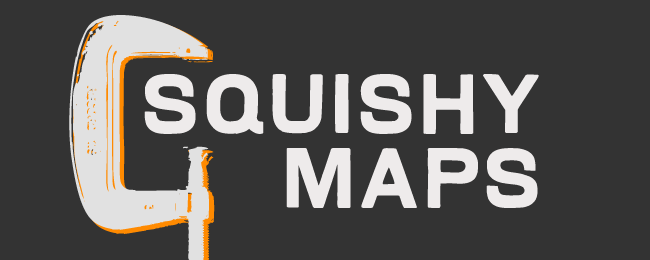
<style>
.page{position:relative;width:650px;height:260px;background:#333333}
.page>*{position:absolute;margin:0}
.t1{font:73.4px/74.1px "LandryGothic";letter-spacing:-0.02em;color:#eeebeb}
</style>
<div class="page">
<p class="t1" style="left:144px;top:74px;width:395px;height:134px;text-align:right">Squishy maps</p>
</div>
